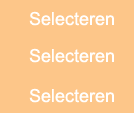
<style>
.page{position:relative;width:134px;height:113px;background:#fdc689}
.page>*{position:absolute;margin:0}
.t1{font:18px "ArialMT";color:#ffffff}
</style>
<div class="page">
<p class="t1" style="left:29px;top:11px;width:85px;height:15px">Selecteren</p>
<p class="t1" style="left:29px;top:48px;width:85px;height:15px">Selecteren</p>
<p class="t1" style="left:29px;top:88px;width:85px;height:15px">Selecteren</p>
</div>
